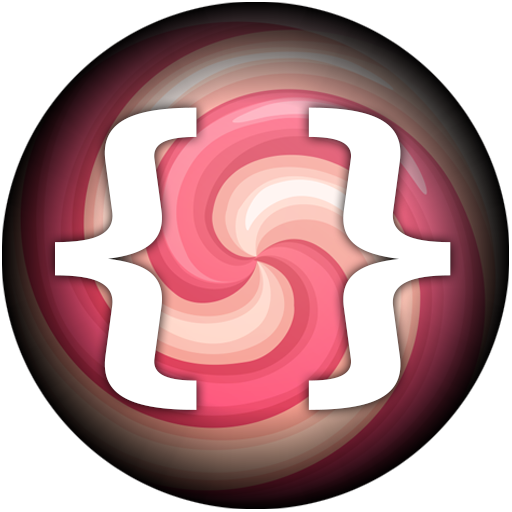
<style>
.page{position:relative;width:512px;height:512px;background:#ffffff}
.page>*{position:absolute;margin:0}
.t1{font:301.6px "FiraCode-SemiBold";color:#ffffff;scale:1.3 1}
</style>
<div class="page">
<p class="t1" style="left:55px;top:107px;width:396px;height:303px">{}</p>
</div>
